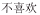
<style>
.page{position:relative;width:40px;height:15px;background:#ffffff}
.page>*{position:absolute;margin:0}
.t1{font:12px "SimSun"}
</style>
<div class="page">
<p class="t1" style="left:1px;top:2px;width:36px;height:12px">不喜欢</p>
</div>
